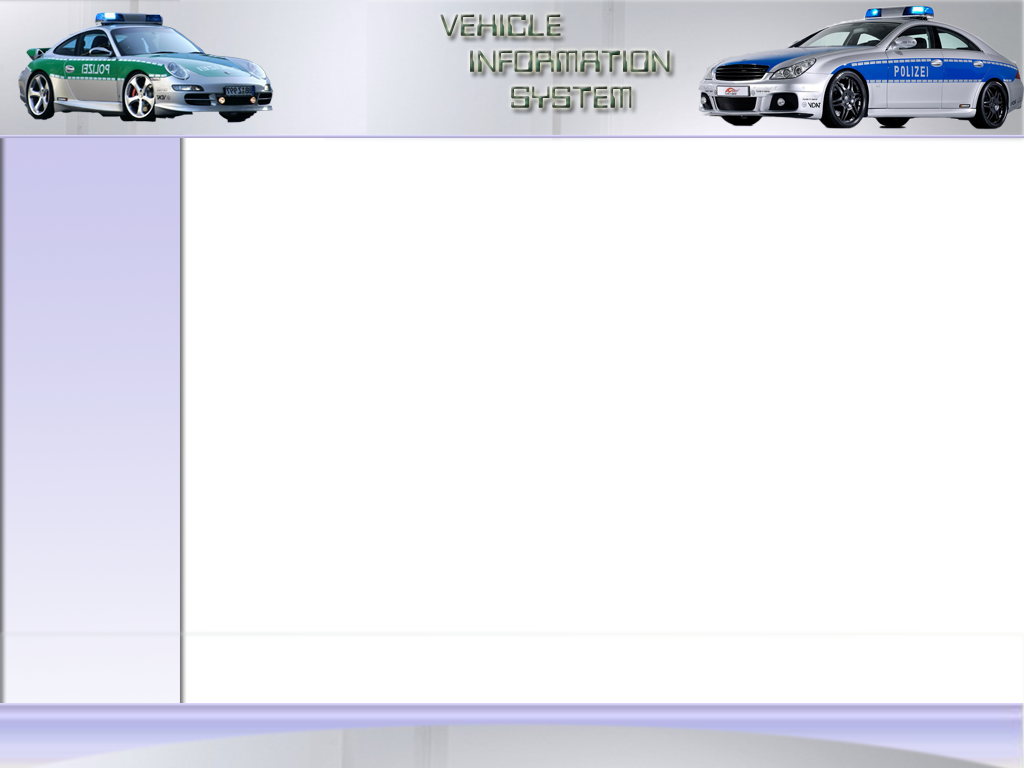
<style>
.page{position:relative;width:1024px;height:768px;background:#ffffff}
.page>*{position:absolute;margin:0}
.t1{font:30px "bitwise"}
</style>
<div class="page">
<p class="t1" style="left:440px;top:14px;width:230px;height:94px">VEHICLE<br>  INFORMATION<br>     SYSTEM</p>
</div>
